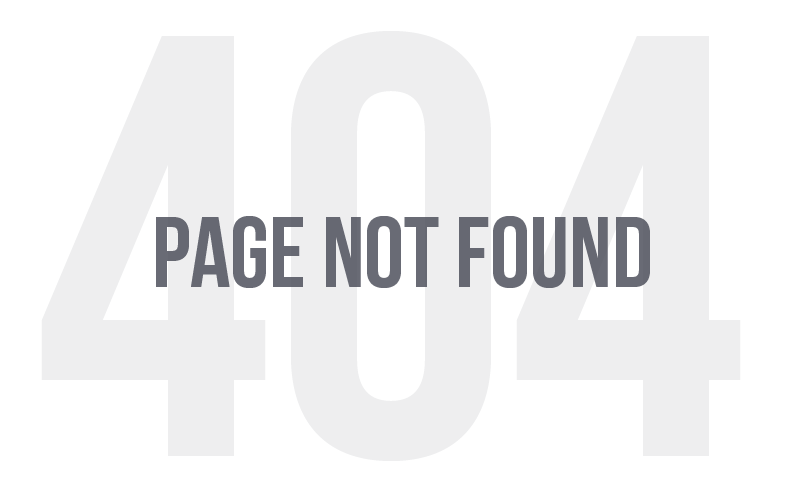
<style>
.page{position:relative;width:800px;height:500px;background:#ffffff}
.page>*{position:absolute;margin:0}
.t1{font:100px "BebasNeue";color:#696b75}
</style>
<div class="page">
<p class="t1" style="left:156px;top:216px;width:494px;height:72px">page not found</p>
</div>
